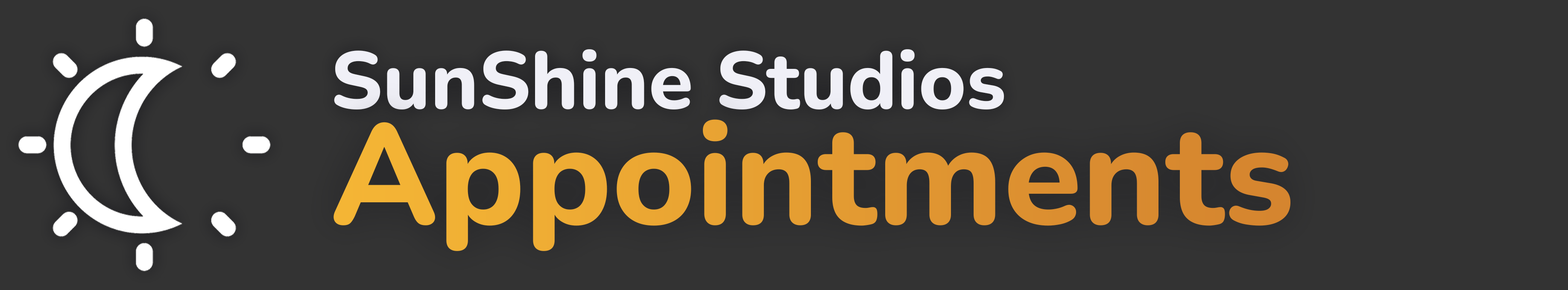
<style>
.page{position:relative;width:1568px;height:290px;background:#333333}
.page>*{position:absolute;margin:0}
.t1{font:81px "Nunito-ExtraBold";color:#f0f0f7;font-style:italic}
.t2{font:142.6px "Nunito-ExtraBold";color:#e59e32;font-style:italic}
</style>
<div class="page">
<p class="t1" style="left:334px;top:49px;width:670px;height:60px">SunShine Studios</p>
<p class="t2" style="left:333px;top:119px;width:957px;height:132px">Appointments</p>
</div>
